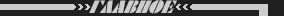
<style>
.page{position:relative;width:284px;height:16px;background:#202020}
.page>*{position:absolute;margin:0}
.t1{font:18px "FuturaEugenia-Italic";color:#cdcdcd;font-style:italic}
</style>
<div class="page">
<p class="t1" style="left:89px;top:0px;width:88px;height:14px">ГЛАВНОЕ</p>
</div>
